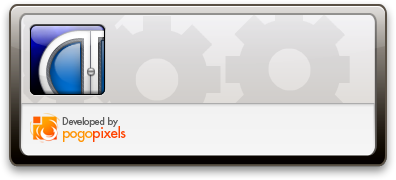
<style>
.page{position:relative;width:396px;height:180px}
.page>*{position:absolute;margin:0}
.t1{font:9.5px/13px "FuturaStd-Medium";color:#5f5f5f}
.t2{font:14px/13px "FuturaStd-Medium";color:#ff9303}
.t3{font:14px/13px "FuturaStd-Medium";color:#ff4300}
</style>
<div class="page">
<p class="t1" style="left:62px;top:117px;width:64px;height:25px">Developed by<br><span class="t2">pogo</span><span class="t3">pixels</span></p>
</div>
